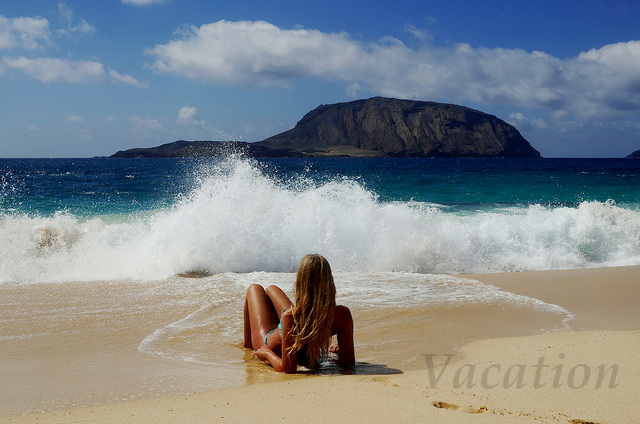
<style>
.page{position:relative;width:640px;height:424px}
.page>*{position:absolute;margin:0}
.t1{font:50px "BookAntiqua-BoldItalic";color:#a49679}
</style>
<div class="page">
<p class="t1" style="left:421px;top:353px;width:199px;height:36px">Vacation</p>
</div>
